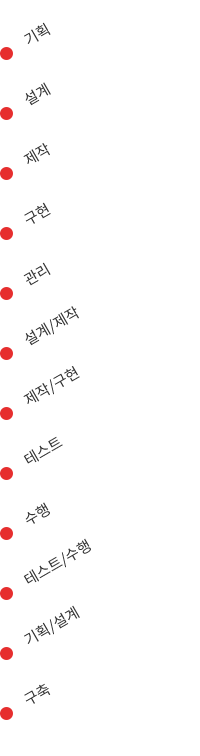
<style>
.page{position:relative;width:200px;height:756px;background:#ffffff}
.page>*{position:absolute;margin:0}
.t1{font:15px "NotoSansKR-Regular";color:#333333;text-transform:uppercase}
</style>
<div class="page">
<p class="t1" style="left:24px;top:22px;width:27px;height:22px;rotate:-30deg">기획</p>
<p class="t1" style="left:25px;top:82px;width:26px;height:24px;rotate:-30deg">설계</p>
<p class="t1" style="left:23px;top:143px;width:27px;height:21px;rotate:-30deg">제작</p>
<p class="t1" style="left:24px;top:202px;width:27px;height:22px;rotate:-30deg">구현</p>
<p class="t1" style="left:23px;top:262px;width:28px;height:24px;rotate:-30deg">관리</p>
<p class="t1" style="left:25px;top:306px;width:54px;height:40px;rotate:-30deg">설계/제작</p>
<p class="t1" style="left:23px;top:366px;width:57px;height:38px;rotate:-30deg">제작/구현</p>
<p class="t1" style="left:23px;top:436px;width:40px;height:28px;rotate:-30deg">테스트</p>
<p class="t1" style="left:25px;top:502px;width:25px;height:22px;rotate:-30deg">수행</p>
<p class="t1" style="left:23px;top:538px;width:68px;height:46px;rotate:-30deg">테스트/수행</p>
<p class="t1" style="left:24px;top:605px;width:56px;height:39px;rotate:-30deg">기획/설계</p>
<p class="t1" style="left:24px;top:683px;width:27px;height:21px;rotate:-30deg">구축</p>
</div>
